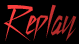
<style>
.page{position:relative;width:79px;height:44px;background:#000000}
.page>*{position:absolute;margin:0}
.t1{font:37.9px "StillTime-Regular";color:#fa3e3d}
.t2{font:37.9px "StillTime-Regular";color:#e83938}
.t3{font:37.9px "StillTime-Regular";color:#d53534}
.t4{font:37.9px "StillTime-Regular";color:#c43030}
.t5{font:37.9px "StillTime-Regular";color:#b32c2b}
.t6{font:37.9px "StillTime-Regular";color:#a12726}
</style>
<div class="page">
<p class="t1" style="left:3px;top:4px;width:74px;height:37px">R<span class="t2">e</span><span class="t3">p</span><span class="t4">l</span><span class="t5">a</span><span class="t6">y</span></p>
</div>
